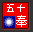
<style>
.page{position:relative;width:33px;height:32px;background:#f20000}
.page>*{position:absolute;margin:0}
.t1{font:10.4px "SimSun";color:#ffffff}
.t2{font:11.7px "SimSun";color:#ffffff}
</style>
<div class="page">
<p class="t1" style="left:7px;top:4px;width:18px;height:8px">五十</p>
<p class="t2" style="left:16px;top:15px;width:11px;height:12px">奉</p>
</div>
